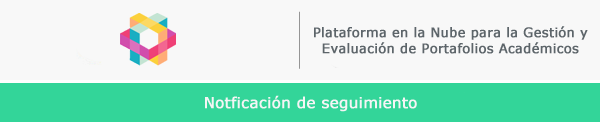
<style>
.page{position:relative;width:600px;height:122px;background:#f8f8f8}
.page>*{position:absolute;margin:0}
.t1{font:13px "Verdana";color:#5d656a;font-weight:bold}
.t2{font:15px "Verdana";color:#f5f5f5;font-weight:bold}
</style>
<div class="page">
<p class="t1" style="left:314px;top:26px;width:274px;height:28px;text-align:center">Plataforma en la Nube para la Gestión y Evaluación de Portafolios Académicos</p>
<p class="t2" style="left:205px;top:95px;width:212px;height:17px">Notficación de seguimiento</p>
</div>
